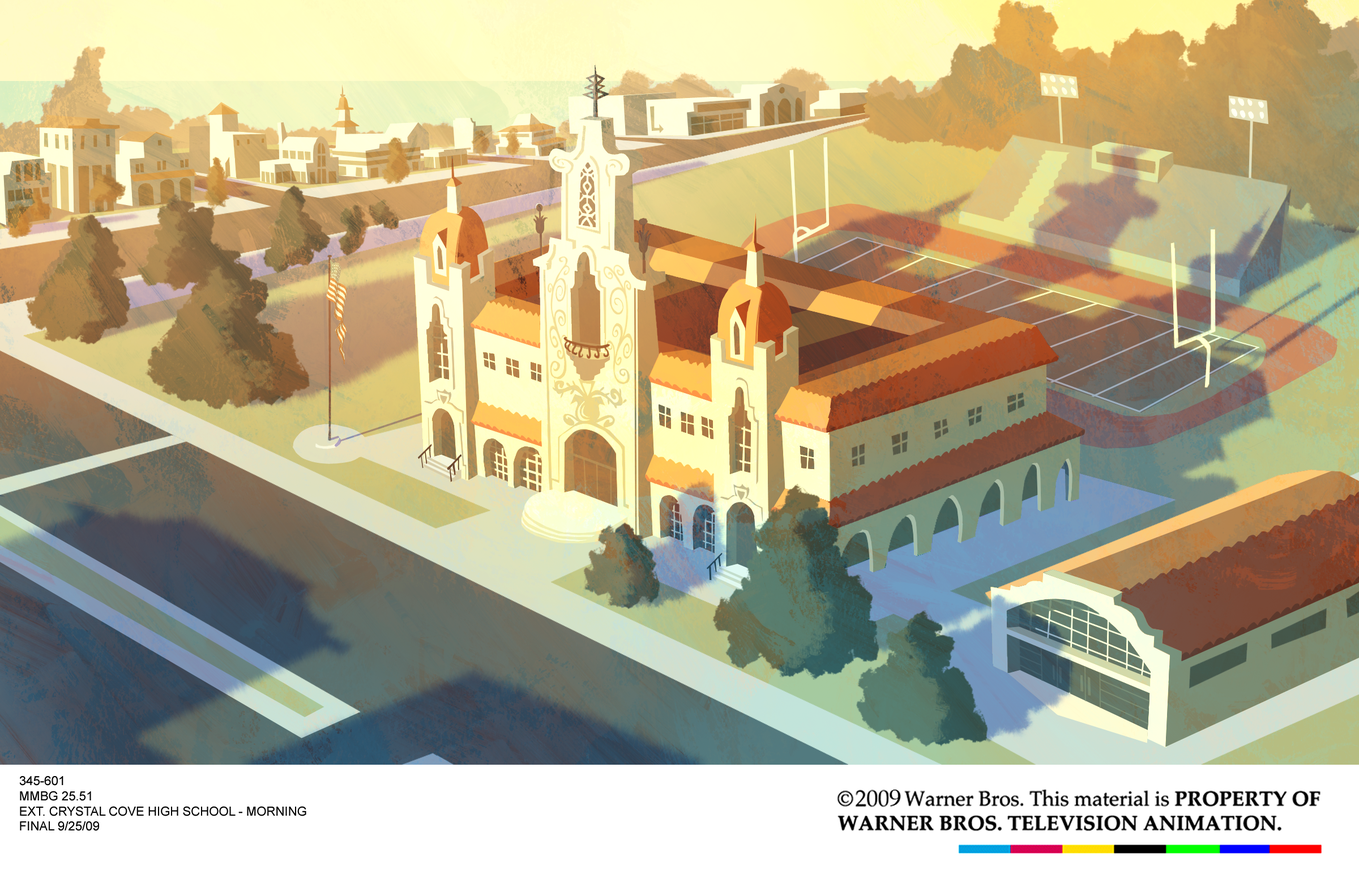
<style>
.page{position:relative;width:1359px;height:878px}
.page>*{position:absolute;margin:0}
.t1{font:12.5px "ArialMT";color:#000000}
</style>
<div class="page">
<p class="t1" style="left:19px;top:776px;width:287px;height:55px">345-601<br>MMBG 25.51<br>EXT. CRYSTAL COVE HIGH SCHOOL - MORNING<br>FINAL 9/25/09</p>
</div>
